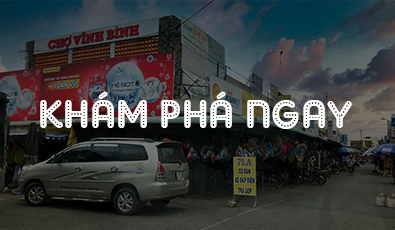
<style>
.page{position:relative;width:395px;height:230px}
.page>*{position:absolute;margin:0}
.t1{font:40px "SVN-AdamGorry";color:#ffffff}
</style>
<div class="page">
<p class="t1" style="left:40px;top:91px;width:312px;height:38px">khám phá ngay</p>
</div>
